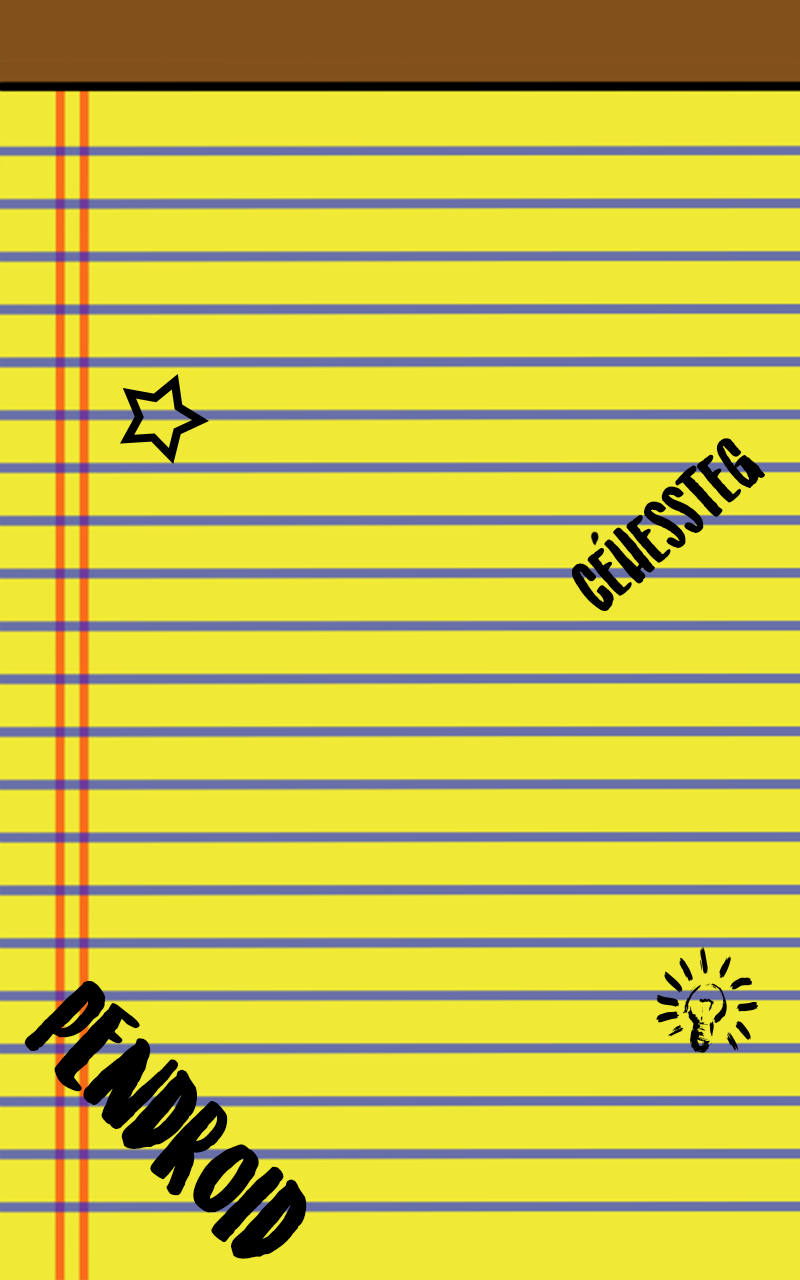
<style>
.page{position:relative;width:800px;height:1280px;background:#f0ea36}
.page>*{position:absolute;margin:0}
.t1{font:70.6px "SunriseInternationalDemo";color:#000000}
.t2{font:123.5px "SunriseInternationalDemo";color:#000000}
</style>
<div class="page">
<p class="t1" style="left:572px;top:438px;width:193px;height:173px;rotate:-41deg">cehessteg</p>
<p class="t2" style="left:24px;top:981px;width:283px;height:278px;rotate:45deg">PENDROID</p>
</div>
